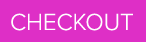
<style>
.page{position:relative;width:146px;height:42px;background:#de2fc6}
.page>*{position:absolute;margin:0}
.t1{font:24px "ProximaNova-Light";color:#ffffff}
</style>
<div class="page">
<p class="t1" style="left:11px;top:13px;width:122px;height:18px">CHECKOUT</p>
</div>
